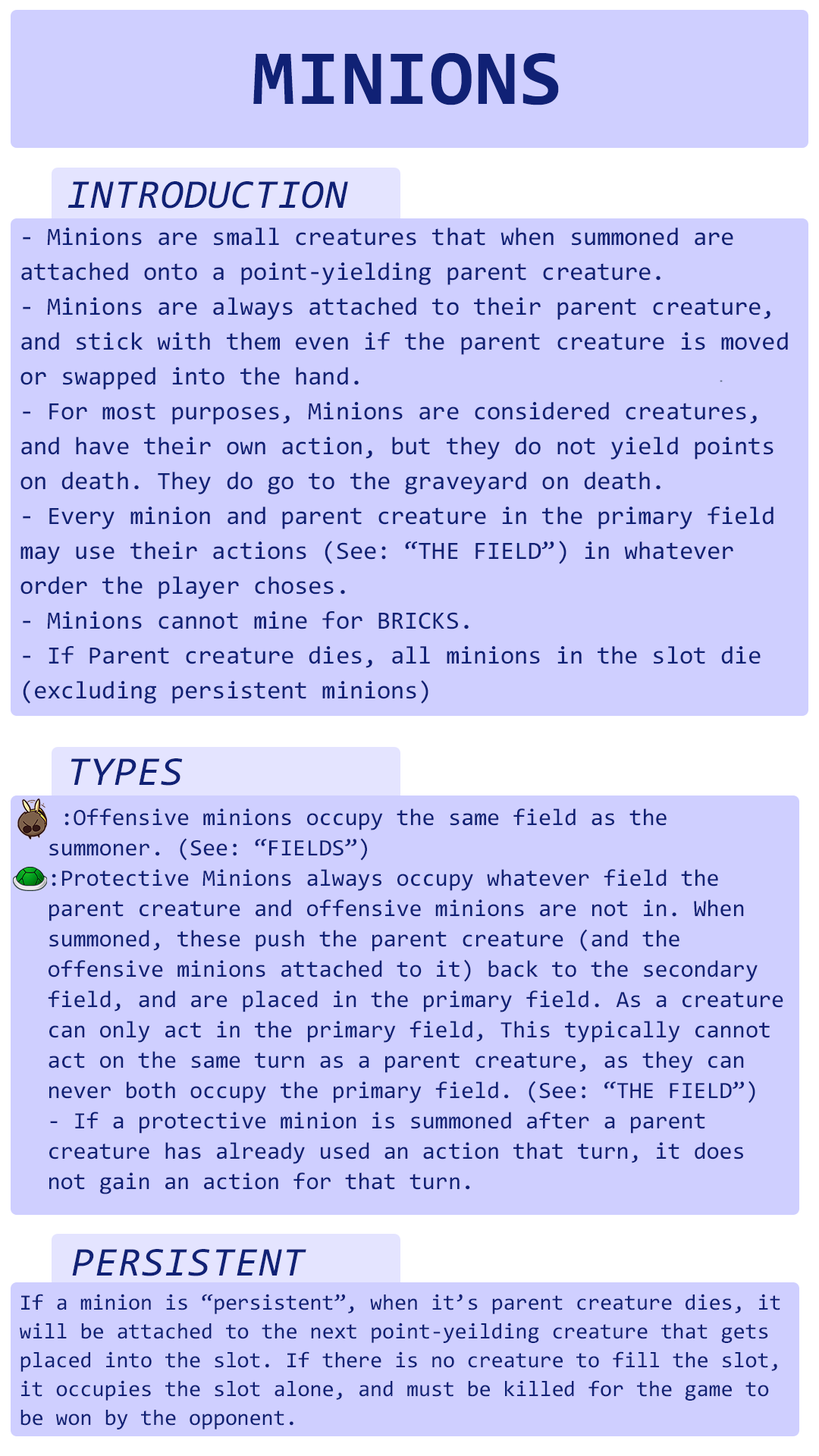
<style>
.page{position:relative;width:819px;height:1456px;background:#cfcfff}
.page>*{position:absolute;margin:0}
.t1{font:78.3px "Consolas-Bold";letter-spacing:0.02em;color:#102175}
.t2{font:41.1px "Consolas-Italic";letter-spacing:0.02em;color:#102175}
.t3{font:25px/34.9px "Consolas";color:#102175}
.t4{font:23.5px/30.3px "Consolas";color:#102175}
.t5{font:22px/28.8px "Consolas";color:#102175}
</style>
<div class="page">
<p class="t1" style="left:253px;top:53px;width:306px;height:52px">MINIONS</p>
<p class="t2" style="left:67px;top:181px;width:281px;height:28px">INTRODUCTION</p>
<p class="t3" style="left:20px;top:227px;width:768px;height:477px">- Minions are small creatures that when summoned are attached onto a point-yielding parent creature.<br>- Minions are always attached to their parent creature, and stick with them even if the parent creature is moved or swapped into the hand.<br>- For most purposes, Minions are considered creatures, and have their own action, but they do not yield points on death. They do go to the graveyard on death.<br>- Every minion and parent creature in the primary field may use their actions (See: “THE FIELD”) in whatever order the player choses.<br>- Minions cannot mine for BRICKS.<br>- If Parent creature dies, all minions in the slot die (excluding persistent minions)</p>
<p class="t2" style="left:71px;top:758px;width:112px;height:28px">TYPES</p>
<p class="t4" style="left:48px;top:808px;width:735px;height:386px">:Offensive minions occupy the same field as the summoner. (See: “FIELDS”)<br>:Protective Minions always occupy whatever field the parent creature and offensive minions are not in. When summoned, these push the parent creature (and the offensive minions attached to it) back to the secondary field, and are placed in the primary field. As a creature can only act in the primary field, This typically cannot act on the same turn as a parent creature, as they can never both occupy the primary field. (See: “THE FIELD”)<br>- If a protective minion is summoned after a parent creature has already used an action that turn, it does not gain an action for that turn.</p>
<p class="t2" style="left:72px;top:1249px;width:234px;height:27px">PERSISTENT</p>
<p class="t5" style="left:20px;top:1294px;width:760px;height:135px">If a minion is “persistent”, when it’s parent creature dies, it will be attached to the next point-yeilding creature that gets placed into the slot. If there is no creature to fill the slot, it occupies the slot alone, and must be killed for the game to be won by the opponent.</p>
</div>
